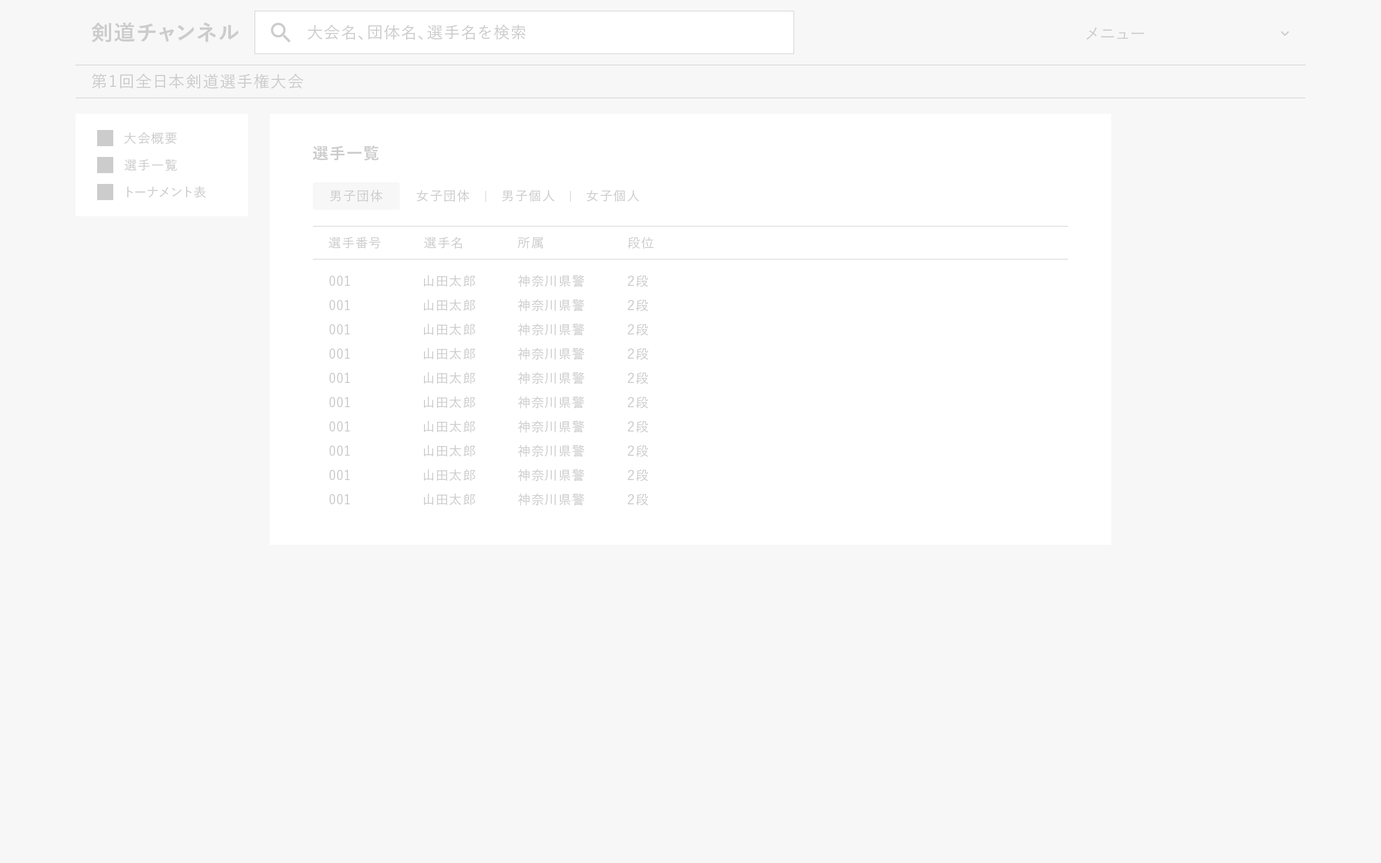
<style>
.page{position:relative;width:1381px;height:863px;background:#f7f7f7}
.page>*{position:absolute;margin:0}
.t1{font:21.6px "YuGo-Bold";letter-spacing:0.05em;color:#cccccc}
.t2{font:16.2px "YuGo-Medium";letter-spacing:0.05em;color:#cccccc}
.t3{font:12.9px/27px "YuGo-Medium";letter-spacing:0.05em;color:#cccccc}
.t4{font:16.2px "YuGo-Bold";letter-spacing:0.05em;color:#cccccc}
.t5{font:12.9px "YuGo-Medium";letter-spacing:0.05em;color:#cccccc}
.t6{font:12.9px/24.3px "YuGo-Medium";letter-spacing:0.05em;color:#cccccc}
</style>
<div class="page">
<p class="t1" style="left:91px;top:22px;width:148px;height:21px">剣道チャンネル</p>
<p class="t2" style="left:308px;top:24px;width:218px;height:16px">大会名、団体名、選手名を検索</p>
<p class="t2" style="left:1086px;top:27px;width:58px;height:13px">メニュー</p>
<p class="t2" style="left:92px;top:73px;width:212px;height:16px">第1回全日本剣道選手権大会</p>
<p class="t3" style="left:124px;top:132px;width:82px;height:66px">大会概要<br>選手一覧<br>トーナメント表</p>
<p class="t4" style="left:313px;top:145px;width:66px;height:16px">選手一覧</p>
<p class="t5" style="left:330px;top:190px;width:53px;height:12px">男子団体</p>
<p class="t5" style="left:417px;top:190px;width:52px;height:12px">女子団体</p>
<p class="t5" style="left:502px;top:190px;width:53px;height:12px">男子個人</p>
<p class="t5" style="left:586px;top:190px;width:53px;height:12px">女子個人</p>
<p class="t5" style="left:329px;top:237px;width:52px;height:12px">選手番号</p>
<p class="t5" style="left:424px;top:237px;width:38px;height:12px">選手名</p>
<p class="t5" style="left:517px;top:237px;width:26px;height:12px">所属</p>
<p class="t5" style="left:628px;top:237px;width:26px;height:12px">段位</p>
<p class="t6" style="left:329px;top:276px;width:21px;height:228px">001<br>001<br>001<br>001<br>001<br>001<br>001<br>001<br>001<br>001</p>
<p class="t6" style="left:424px;top:275px;width:51px;height:231px">山田太郎<br>山田太郎<br>山田太郎<br>山田太郎<br>山田太郎<br>山田太郎<br>山田太郎<br>山田太郎<br>山田太郎<br>山田太郎</p>
<p class="t6" style="left:518px;top:275px;width:66px;height:231px">神奈川県警<br>神奈川県警<br>神奈川県警<br>神奈川県警<br>神奈川県警<br>神奈川県警<br>神奈川県警<br>神奈川県警<br>神奈川県警<br>神奈川県警</p>
<p class="t6" style="left:628px;top:275px;width:21px;height:231px">２段<br>２段<br>２段<br>２段<br>２段<br>２段<br>２段<br>２段<br>２段<br>２段</p>
</div>
